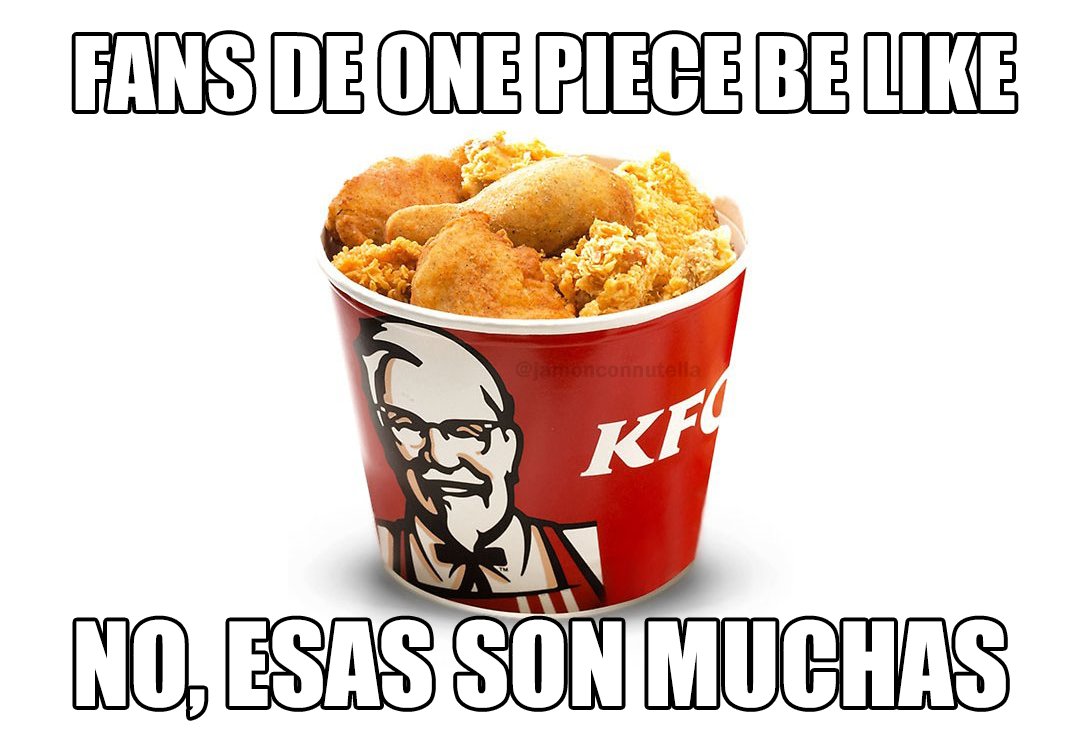
<style>
.page{position:relative;width:1080px;height:741px;background:#ffffff}
.page>*{position:absolute;margin:0}
.t1{font:93.8px "Impact";color:#ffffff}
.t2{font:22.9px "FranklinGothic-Demi"}
.t3{font:107.1px "Impact";color:#ffffff}
</style>
<div class="page">
<p class="t1" style="left:75px;top:34px;width:940px;height:78px">FANS DE ONE PIECE BE LIKE</p>
<p class="t2" style="left:515px;top:361px;width:186px;height:20px">@jamonconnutella</p>
<p class="t3" style="left:76px;top:619px;width:930px;height:98px">NO, ESAS SON MUCHAS</p>
</div>
